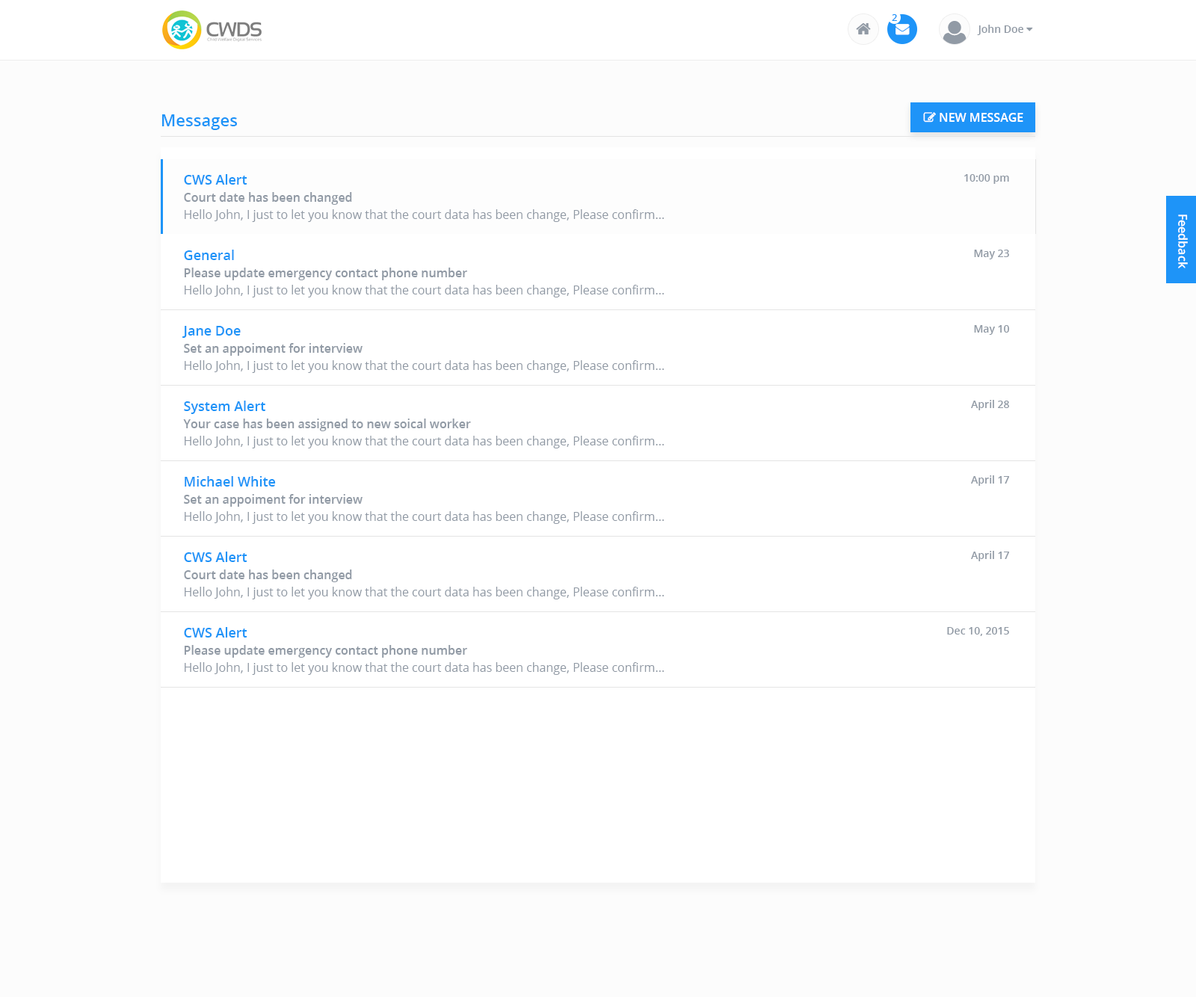
<style>
.page{position:relative;width:1196px;height:997px;background:#ffffff}
.page>*{position:absolute;margin:0}
.t1{font:9.5px "OpenSans-Semibold";color:#1e94f8}
.t2{font:16.4px "OpenSans-Semibold";color:#1e94f8}
.t3{font:13.5px "OpenSans-Semibold";color:#1e94f8}
.t4{font:10.5px "OpenSans-Semibold";color:#919aa5}
.t5{font:12px "OpenSans-Semibold";color:#919aa5}
.t6{font:12px "OpenSans";color:#919aa5}
.t7{font:12px "OpenSans-Semibold";color:#ffffff}
</style>
<div class="page">
<p class="t1" style="left:892px;top:14px;width:5px;height:7px">2</p>
<p class="t2" style="left:162px;top:114px;width:75px;height:16px">Messages</p>
<p class="t3" style="left:184px;top:174px;width:63px;height:11px">CWS Alert</p>
<p class="t4" style="left:964px;top:174px;width:45px;height:10px">10:00 pm</p>
<p class="t5" style="left:184px;top:192px;width:168px;height:13px">Court date has been changed</p>
<p class="t6" style="left:185px;top:209px;width:479px;height:13px">Hello John, I just to let you know that the court data has been change, Please confirm...</p>
<p class="t7" style="left:1178px;top:215px;width:10px;height:53px;rotate:90deg">Feedback</p>
<p class="t3" style="left:184px;top:250px;width:50px;height:10px">General</p>
<p class="t4" style="left:974px;top:250px;width:35px;height:9px">May 23</p>
<p class="t5" style="left:184px;top:268px;width:283px;height:12px">Please update emergency contact phone number</p>
<p class="t6" style="left:185px;top:285px;width:479px;height:12px">Hello John, I just to let you know that the court data has been change, Please confirm...</p>
<p class="t3" style="left:182px;top:326px;width:59px;height:12px">Jane Doe</p>
<p class="t4" style="left:974px;top:325px;width:35px;height:10px">May 10</p>
<p class="t5" style="left:184px;top:343px;width:179px;height:13px">Set an appoiment for interview</p>
<p class="t6" style="left:185px;top:360px;width:479px;height:13px">Hello John, I just to let you know that the court data has been change, Please confirm...</p>
<p class="t3" style="left:184px;top:401px;width:81px;height:13px">System Alert</p>
<p class="t4" style="left:971px;top:400px;width:38px;height:10px">April 28</p>
<p class="t5" style="left:183px;top:419px;width:288px;height:12px">Your case has been assigned to new soical worker</p>
<p class="t6" style="left:185px;top:436px;width:479px;height:12px">Hello John, I just to let you know that the court data has been change, Please confirm...</p>
<p class="t3" style="left:185px;top:476px;width:91px;height:11px">Michael White</p>
<p class="t4" style="left:971px;top:475px;width:38px;height:11px">April 17</p>
<p class="t5" style="left:184px;top:494px;width:179px;height:13px">Set an appoiment for interview</p>
<p class="t6" style="left:185px;top:511px;width:479px;height:13px">Hello John, I just to let you know that the court data has been change, Please confirm...</p>
<p class="t3" style="left:184px;top:552px;width:63px;height:10px">CWS Alert</p>
<p class="t4" style="left:971px;top:551px;width:38px;height:10px">April 17</p>
<p class="t5" style="left:184px;top:570px;width:168px;height:12px">Court date has been changed</p>
<p class="t6" style="left:185px;top:587px;width:479px;height:12px">Hello John, I just to let you know that the court data has been change, Please confirm...</p>
<p class="t3" style="left:184px;top:627px;width:63px;height:11px">CWS Alert</p>
<p class="t4" style="left:947px;top:627px;width:62px;height:9px">Dec 10, 2015</p>
<p class="t5" style="left:184px;top:645px;width:283px;height:13px">Please update emergency contact phone number</p>
<p class="t6" style="left:185px;top:662px;width:479px;height:13px">Hello John, I just to let you know that the court data has been change, Please confirm...</p>
</div>
